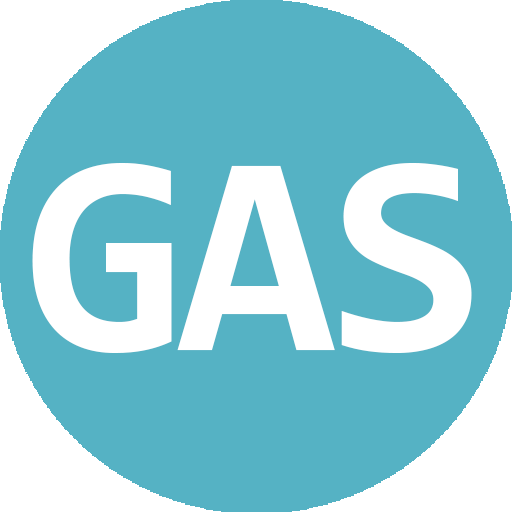
<style>
.page{position:relative;width:512px;height:512px;background:#55b2c4}
.page>*{position:absolute;margin:0}
.t1{font:288px "Consolas-Bold";letter-spacing:-0.025em;color:#ffffff}
</style>
<div class="page">
<p class="t1" style="left:32px;top:162px;width:440px;height:191px">GAS</p>
</div>
